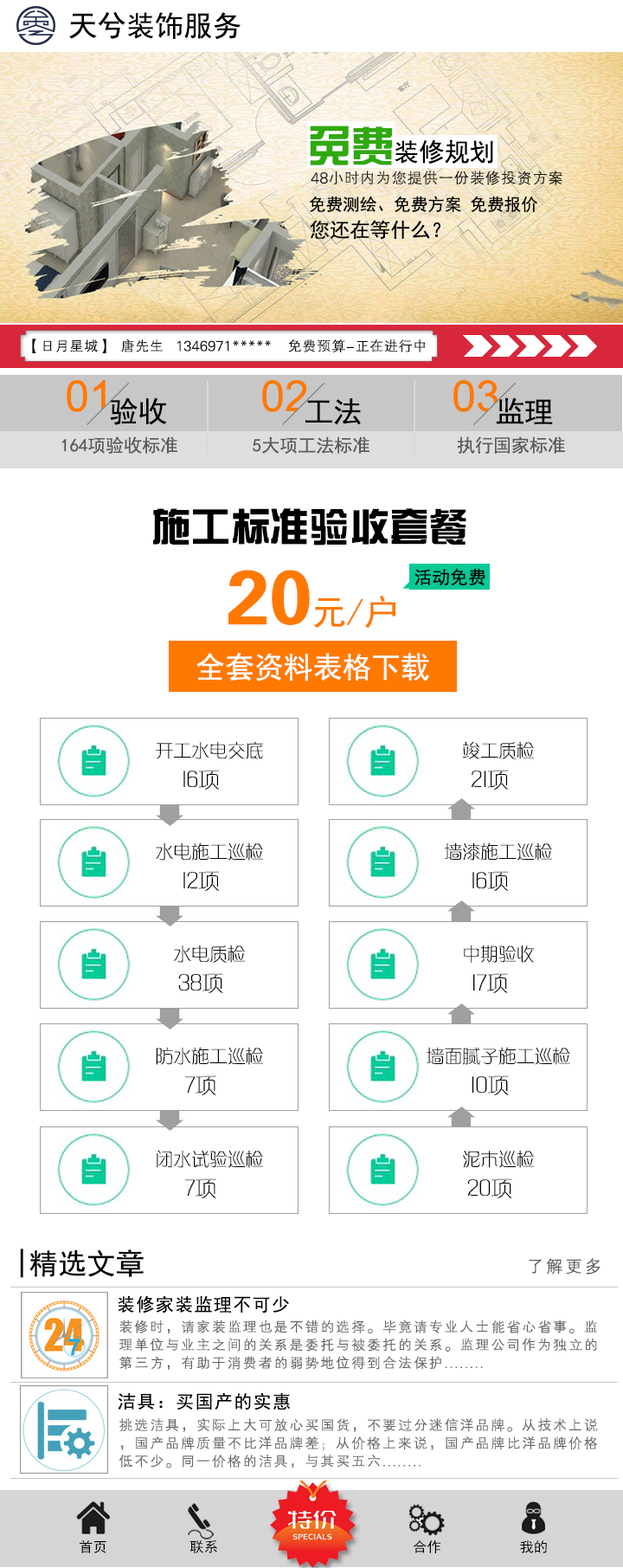
<style>
.page{position:relative;width:623px;height:1568px;background:#ffffff}
.page>*{position:absolute;margin:0}
.t1{font:28.9px "SimHei";color:#000000}
.t2{font:25.4px "SimHei";color:#000000}
.t3{font:42.7px "FZZYJW--GB1-0";color:#2fa90e}
.t4{font:15.6px "FZXH1JW--GB1-0";color:#141414}
.t5{font:17px "SimHei";color:#000000}
.t6{font:20.1px "SimHei";color:#000000}
.t7{font:14.4px "FZXH1JW--GB1-0";color:#080808}
.t8{font:43.3px "ArialMT";color:#ff7900}
.t9{font:18px "SimHei";color:#5a5a5a}
.t10{font:39.7px "FZZYJW--GB1-0";color:#000000}
.t11{font:34.9px "SimHei";color:#ff7900}
.t12{font:76.7px "FZZYJW--GB1-0";color:#ff7900}
.t13{font:18px "SimHei";color:#000000}
.t14{font:29.8px "SimHei";color:#ffffff}
.t15{font:18px "FZXQJW--GB1-0";color:#000000}
.t16{font:21.6px "FZXQJW--GB1-0";color:#000000}
.t17{font:18px "FZXH1JW--GB1-0";letter-spacing:0.075em;color:#5a5a5a}
.t18{font:18px "SimHei";letter-spacing:0.075em;color:#000000}
.t19{font:14.4px/18px "FZXH1JW--GB1-0";letter-spacing:0.075em;color:#636363}
.t20{font:18px/21.6px "SimHei";letter-spacing:0.075em;color:#000000}
.t21{font:14.1px "SimHei";color:#000000}
</style>
<div class="page">
<p class="t1" style="left:69px;top:11px;width:172px;height:29px">天兮装饰服务</p>
<p class="t2" style="left:310px;top:126px;width:184px;height:39px"><span class="t3">免费</span>装修规划</p>
<p class="t4" style="left:311px;top:171px;width:252px;height:14px">48小时内为您提供一份装修投资方案</p>
<p class="t5" style="left:309px;top:196px;width:230px;height:17px">免费测绘、免费方案 免费报价</p>
<p class="t6" style="left:310px;top:220px;width:131px;height:19px">您还在等什么？</p>
<p class="t7" style="left:32px;top:339px;width:393px;height:14px">【日月星城】  唐先生   1346971*****    免费预算-正在进行中</p>
<p class="t8" style="left:67px;top:380px;width:39px;height:32px">01</p>
<p class="t8" style="left:262px;top:380px;width:45px;height:32px">02</p>
<p class="t8" style="left:454px;top:380px;width:45px;height:32px">03</p>
<p class="t1" style="left:110px;top:397px;width:57px;height:28px">验收</p>
<p class="t1" style="left:306px;top:398px;width:55px;height:27px">工法</p>
<p class="t1" style="left:496px;top:397px;width:57px;height:27px">监理</p>
<p class="t9" style="left:61px;top:436px;width:116px;height:18px">164项验收标准</p>
<p class="t9" style="left:253px;top:436px;width:117px;height:18px">5大项工法标准</p>
<p class="t9" style="left:457px;top:436px;width:108px;height:18px">执行国家标准</p>
<p class="t10" style="left:153px;top:508px;width:314px;height:37px">施工标准验收套餐</p>
<p class="t11" style="left:229px;top:570px;width:167px;height:59px"><span class="t12">20</span>元/户</p>
<p class="t13" style="left:415px;top:568px;width:71px;height:18px">活动免费</p>
<p class="t14" style="left:197px;top:653px;width:232px;height:28px">全套资料表格下载</p>
<p class="t15" style="left:156px;top:741px;width:107px;height:18px">开工水电交底</p>
<p class="t15" style="left:462px;top:741px;width:73px;height:18px">竣工质检</p>
<p class="t16" style="left:184px;top:770px;width:36px;height:20px">16项</p>
<p class="t16" style="left:472px;top:770px;width:37px;height:20px">21项</p>
<p class="t15" style="left:155px;top:842px;width:108px;height:19px">水电施工巡检</p>
<p class="t15" style="left:445px;top:842px;width:107px;height:19px">墙漆施工巡检</p>
<p class="t16" style="left:184px;top:871px;width:36px;height:20px">12项</p>
<p class="t16" style="left:473px;top:871px;width:36px;height:20px">16项</p>
<p class="t15" style="left:173px;top:945px;width:73px;height:18px">水电质检</p>
<p class="t15" style="left:464px;top:945px;width:70px;height:18px">中期验收</p>
<p class="t16" style="left:178px;top:973px;width:45px;height:20px">38项</p>
<p class="t16" style="left:474px;top:973px;width:34px;height:20px">17项</p>
<p class="t15" style="left:156px;top:1047px;width:107px;height:18px">防水施工巡检</p>
<p class="t15" style="left:427px;top:1047px;width:144px;height:18px">墙面腻子施工巡检</p>
<p class="t16" style="left:185px;top:1075px;width:31px;height:20px">7项</p>
<p class="t16" style="left:472px;top:1075px;width:37px;height:20px">10项</p>
<p class="t15" style="left:157px;top:1150px;width:106px;height:18px">闭水试验巡检</p>
<p class="t15" style="left:463px;top:1150px;width:72px;height:18px">泥木巡检</p>
<p class="t16" style="left:185px;top:1178px;width:31px;height:20px">7项</p>
<p class="t16" style="left:468px;top:1178px;width:45px;height:20px">20项</p>
<p class="t1" style="left:20px;top:1249px;width:124px;height:29px">|精选文章</p>
<p class="t17" style="left:529px;top:1258px;width:72px;height:16px">了解更多</p>
<p class="t18" style="left:118px;top:1295px;width:171px;height:18px">装修家装监理不可少</p>
<p class="t19" style="left:119px;top:1320px;width:478px;height:50px"><span class="t20"><br></span>装修时，请家装监理也是不错的选择。毕竟请专业人士能省心省事。监<br>理单位与业主之间的关系是委托与被委托的关系。监理公司作为独立的<br>第三方，有助于消费者的弱势地位得到合法保护........</p>
<p class="t18" style="left:118px;top:1392px;width:173px;height:18px">洁具：买国产的实惠</p>
<p class="t19" style="left:119px;top:1418px;width:479px;height:50px">挑选洁具，实际上大可放心买国货，不要过分迷信洋品牌。从技术上说<br>，国产品牌质量不比洋品牌差；从价格上来说，国产品牌比洋品牌价格<br>低不少。同一价格的洁具，与其买五六........</p>
<p class="t21" style="left:80px;top:1540px;width:26px;height:13px">首页</p>
<p class="t21" style="left:190px;top:1540px;width:27px;height:13px">联系</p>
<p class="t21" style="left:414px;top:1539px;width:27px;height:14px">合作</p>
<p class="t21" style="left:520px;top:1540px;width:27px;height:13px">我的</p>
</div>
